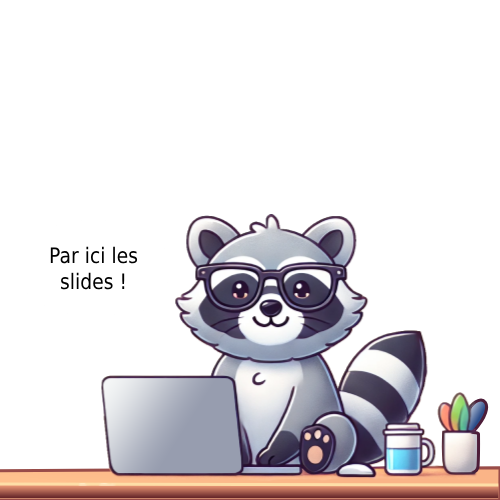
<style>
.page{position:relative;width:500px;height:500px;background:#ffffff}
.page>*{position:absolute;margin:0}
.t1{font:21.3px "DejaVuSans";color:#000000;scale:0.88 1}
</style>
<div class="page">
<p class="t1" style="left:50px;top:246px;width:88px;height:44px;text-align:center">Par ici les slides !</p>
</div>
